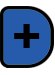
<style>
.page{position:relative;width:55px;height:75px;background:#265bab}
.page>*{position:absolute;margin:0}
.t1{font:50px "Arial-BoldMT";color:#000000}
</style>
<div class="page">
<p class="t1" style="left:14px;top:24px;width:26px;height:24px">+</p>
</div>
